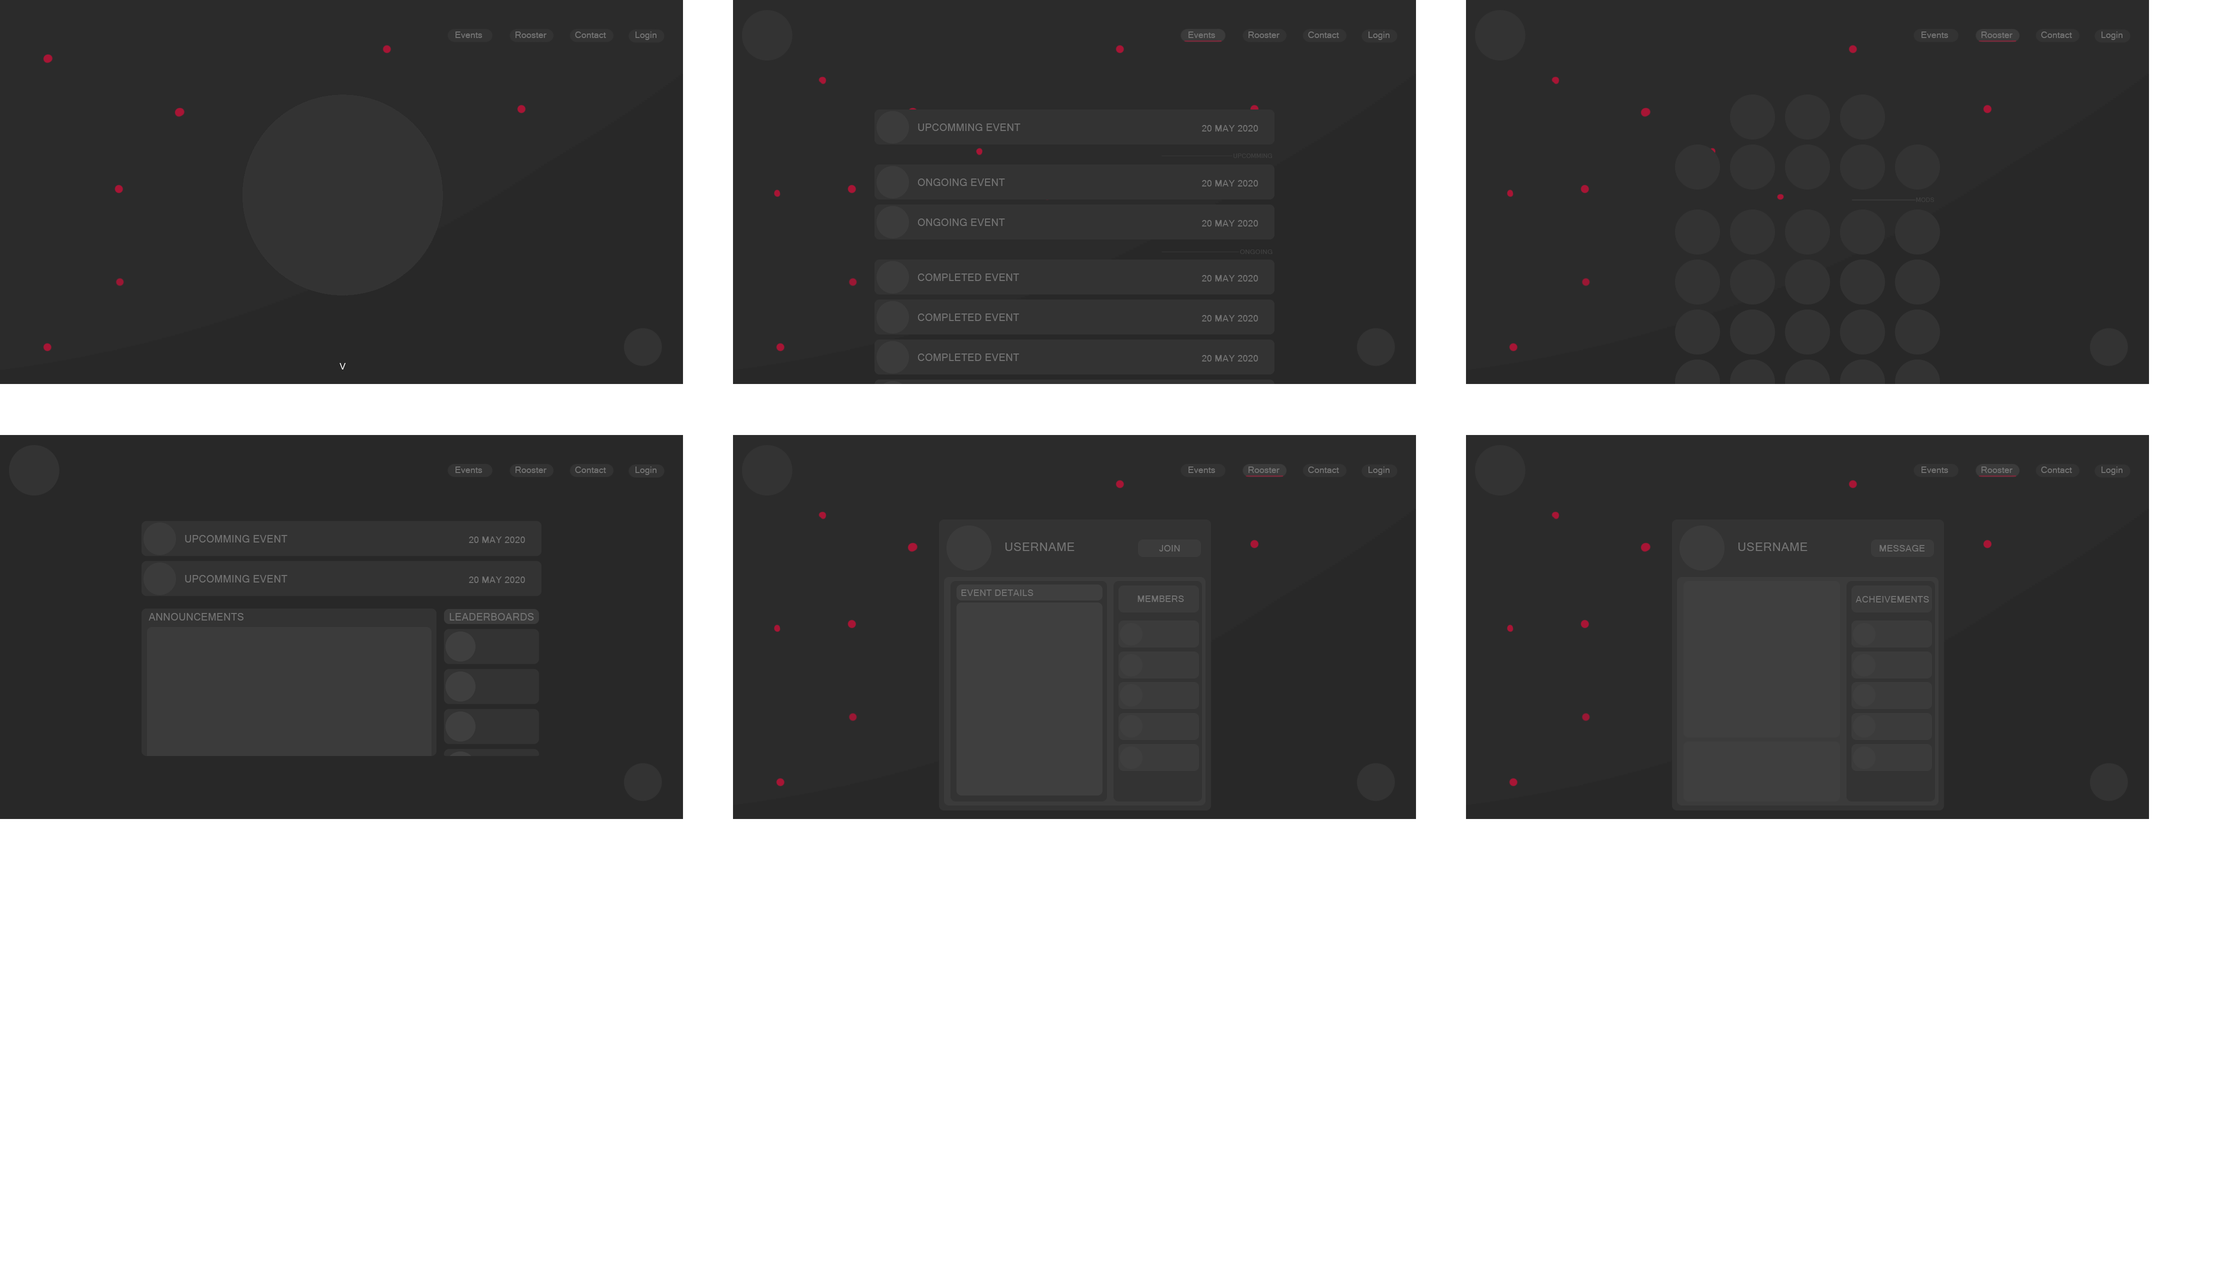
<style>
.page{position:relative;width:2219px;height:1280px;background:#ffffff}
.page>*{position:absolute;margin:0}
.t1{font:9px "MicrosoftSansSerif";color:#737373}
.t2{font:10px "MicrosoftSansSerif";letter-spacing:0.025em;color:#737373}
.t3{font:9px "MicrosoftSansSerif";letter-spacing:0.025em;color:#737373}
.t4{font:6px "MicrosoftSansSerif";letter-spacing:0.025em;color:#3f3f3f}
.t5{font:6px "MicrosoftSansSerif";letter-spacing:0.025em;color:#3f3f3f;scale:1.09 1}
.t6{font:12px "MicrosoftSansSerif";letter-spacing:0.025em;color:#737373}
</style>
<div class="page">
<p class="t1" style="left:456px;top:32px;width:26px;height:6px">Events</p>
<p class="t1" style="left:516px;top:32px;width:30px;height:6px">Rooster</p>
<p class="t1" style="left:575px;top:32px;width:31px;height:6px">Contact</p>
<p class="t1" style="left:636px;top:32px;width:20px;height:8px">Login</p>
<p class="t1" style="left:1188px;top:32px;width:28px;height:6px">Events</p>
<p class="t1" style="left:1248px;top:32px;width:32px;height:6px">Rooster</p>
<p class="t1" style="left:1308px;top:32px;width:31px;height:6px">Contact</p>
<p class="t1" style="left:1368px;top:32px;width:22px;height:8px">Login</p>
<p class="t1" style="left:1922px;top:32px;width:26px;height:6px">Events</p>
<p class="t1" style="left:1982px;top:32px;width:30px;height:6px">Rooster</p>
<p class="t1" style="left:2041px;top:32px;width:31px;height:6px">Contact</p>
<p class="t1" style="left:2102px;top:32px;width:20px;height:8px">Login</p>
<p class="t2" style="left:918px;top:124px;width:102px;height:7px">UPCOMMING EVENT</p>
<p class="t3" style="left:1202px;top:125px;width:56px;height:7px">20 MAY 2020</p>
<p class="t4" style="left:1234px;top:154px;width:38px;height:4px">UPCOMMING</p>
<p class="t2" style="left:918px;top:178px;width:87px;height:8px">ONGOING EVENT</p>
<p class="t3" style="left:1202px;top:180px;width:56px;height:6px">20 MAY 2020</p>
<p class="t4" style="left:1916px;top:198px;width:18px;height:4px">MODS</p>
<p class="t2" style="left:918px;top:218px;width:87px;height:8px">ONGOING EVENT</p>
<p class="t3" style="left:1202px;top:220px;width:56px;height:6px">20 MAY 2020</p>
<p class="t5" style="left:1240px;top:250px;width:32px;height:4px">ONGOING</p>
<p class="t2" style="left:918px;top:274px;width:102px;height:7px">COMPLETED EVENT</p>
<p class="t3" style="left:1202px;top:275px;width:56px;height:7px">20 MAY 2020</p>
<p class="t2" style="left:918px;top:314px;width:102px;height:7px">COMPLETED EVENT</p>
<p class="t3" style="left:1202px;top:315px;width:56px;height:7px">20 MAY 2020</p>
<p class="t2" style="left:918px;top:354px;width:102px;height:7px">COMPLETED EVENT</p>
<p class="t3" style="left:1202px;top:355px;width:56px;height:7px">20 MAY 2020</p>
<p class="t1" style="left:456px;top:466px;width:26px;height:7px">Events</p>
<p class="t1" style="left:516px;top:466px;width:30px;height:7px">Rooster</p>
<p class="t1" style="left:575px;top:466px;width:31px;height:7px">Contact</p>
<p class="t1" style="left:636px;top:466px;width:20px;height:9px">Login</p>
<p class="t1" style="left:1188px;top:466px;width:28px;height:7px">Events</p>
<p class="t1" style="left:1248px;top:466px;width:32px;height:7px">Rooster</p>
<p class="t1" style="left:1308px;top:466px;width:31px;height:7px">Contact</p>
<p class="t1" style="left:1368px;top:466px;width:22px;height:9px">Login</p>
<p class="t1" style="left:1922px;top:466px;width:26px;height:7px">Events</p>
<p class="t1" style="left:1982px;top:466px;width:30px;height:7px">Rooster</p>
<p class="t1" style="left:2041px;top:466px;width:31px;height:7px">Contact</p>
<p class="t1" style="left:2102px;top:466px;width:20px;height:9px">Login</p>
<p class="t2" style="left:185px;top:535px;width:103px;height:7px">UPCOMMING EVENT</p>
<p class="t3" style="left:469px;top:536px;width:56px;height:7px">20 MAY 2020</p>
<p class="t6" style="left:1005px;top:542px;width:69px;height:9px">USERNAME</p>
<p class="t3" style="left:1159px;top:545px;width:21px;height:7px">JOIN</p>
<p class="t6" style="left:1738px;top:542px;width:70px;height:9px">USERNAME</p>
<p class="t3" style="left:1880px;top:545px;width:45px;height:7px">MESSAGE</p>
<p class="t2" style="left:185px;top:575px;width:103px;height:7px">UPCOMMING EVENT</p>
<p class="t3" style="left:469px;top:576px;width:56px;height:7px">20 MAY 2020</p>
<p class="t3" style="left:962px;top:590px;width:72px;height:6px">EVENT DETAILS</p>
<p class="t3" style="left:1138px;top:596px;width:46px;height:6px">MEMBERS</p>
<p class="t3" style="left:1856px;top:596px;width:73px;height:6px">ACHEIVEMENTS</p>
<p class="t2" style="left:148px;top:613px;width:96px;height:7px">ANNOUNCEMENTS</p>
<p class="t2" style="left:450px;top:613px;width:84px;height:7px">LEADERBOARDS</p>
</div>
